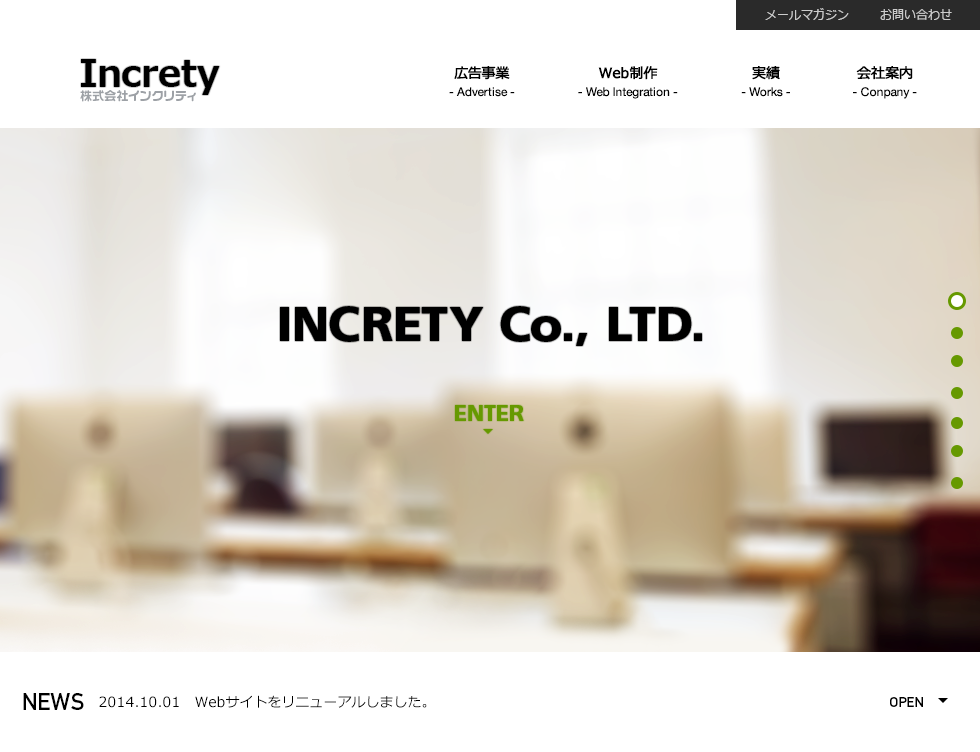
<style>
.page{position:relative;width:980px;height:752px;background:#ffffff}
.page>*{position:absolute;margin:0}
.t1{font:12px "Meiryo";color:#cccccc}
.t2{font:36.6px "Meiryo-Bold";color:#000000}
.t3{font:14px "Meiryo";color:#000000;font-weight:bold}
.t4{font:12px "HelveticaNeue";color:#000000}
.t5{font:12px "VD-LogoMaru-Extra-G";color:#9da1a6}
.t6{font:48px "FrutigerLTStd-Black";color:#000000}
.t7{font:22px "FrutigerLTStd-Black";color:#669900}
.t8{font:24px "DINMittelschrift-Alternate";color:#000000}
.t9{font:14px "Meiryo";color:#000000}
.t10{font:14px "DINMittelschrift";color:#000000}
</style>
<div class="page">
<p class="t1" style="left:765px;top:8px;width:84px;height:12px">メールマガジン</p>
<p class="t1" style="left:880px;top:9px;width:72px;height:11px">お問い合わせ</p>
<p class="t2" style="left:81px;top:59px;width:139px;height:36px">Increty</p>
<p class="t3" style="left:454px;top:66px;width:56px;height:14px">広告事業</p>
<p class="t3" style="left:598px;top:66px;width:60px;height:14px">Web制作</p>
<p class="t3" style="left:752px;top:66px;width:28px;height:14px">実績</p>
<p class="t3" style="left:856px;top:66px;width:57px;height:14px">会社案内</p>
<p class="t4" style="left:449px;top:87px;width:66px;height:10px">- Advertise -</p>
<p class="t4" style="left:578px;top:87px;width:100px;height:12px">- Web Integration -</p>
<p class="t4" style="left:741px;top:87px;width:49px;height:10px">- Works -</p>
<p class="t4" style="left:853px;top:87px;width:64px;height:12px">- Conpany -</p>
<p class="t5" style="left:80px;top:90px;width:116px;height:12px">株式会社インクリティ</p>
<p class="t6" style="left:280px;top:306px;width:422px;height:40px">INCRETY Co., LTD.</p>
<p class="t7" style="left:455px;top:405px;width:69px;height:16px">ENTER</p>
<p class="t8" style="left:23px;top:693px;width:61px;height:17px">NEWS</p>
<p class="t9" style="left:99px;top:695px;width:328px;height:13px">2014.10.01　Webサイトをリニューアルしました。</p>
<p class="t10" style="left:890px;top:697px;width:33px;height:10px">OPEN</p>
</div>
